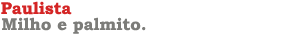
<style>
.page{position:relative;width:300px;height:50px;background:#ffffff}
.page>*{position:absolute;margin:0}
.t1{font:17px "BookmanOldStyle-Bold";color:#d42525}
.t2{font:17px "BookmanOldStyle-Bold";color:#7c7c79}
</style>
<div class="page">
<p class="t1" style="left:1px;top:1px;width:71px;height:14px">Paulista</p>
<p class="t2" style="left:2px;top:17px;width:144px;height:17px">Milho e palmito.</p>
</div>
